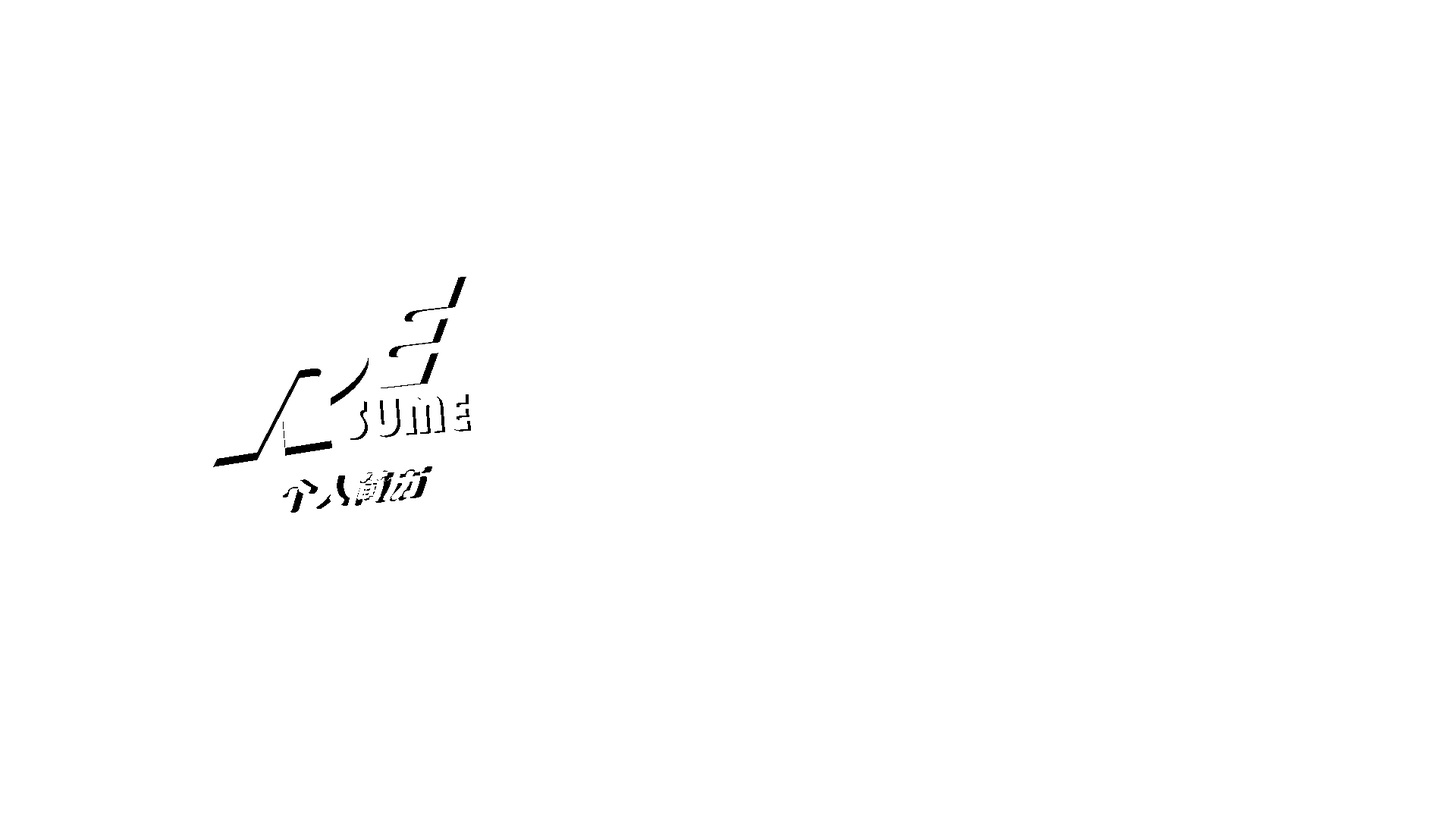
<style>
.page{position:relative;width:1456px;height:819px;background:#ffffff}
.page>*{position:absolute;margin:0}
.t1{font:54.6px "Bauhaus93";color:#ffffff}
.t2{font:36.4px "STHupo";scale:1.03 1}
</style>
<div class="page">
<p class="t1" style="left:347px;top:393px;width:121px;height:45px;rotate:-4deg">SUME</p>
<p class="t1" style="left:350px;top:394px;width:121px;height:46px;rotate:-4deg">SUME</p>
<p class="t2" style="left:282px;top:466px;width:150px;height:47px;rotate:-7deg">个人简历</p>
</div>
